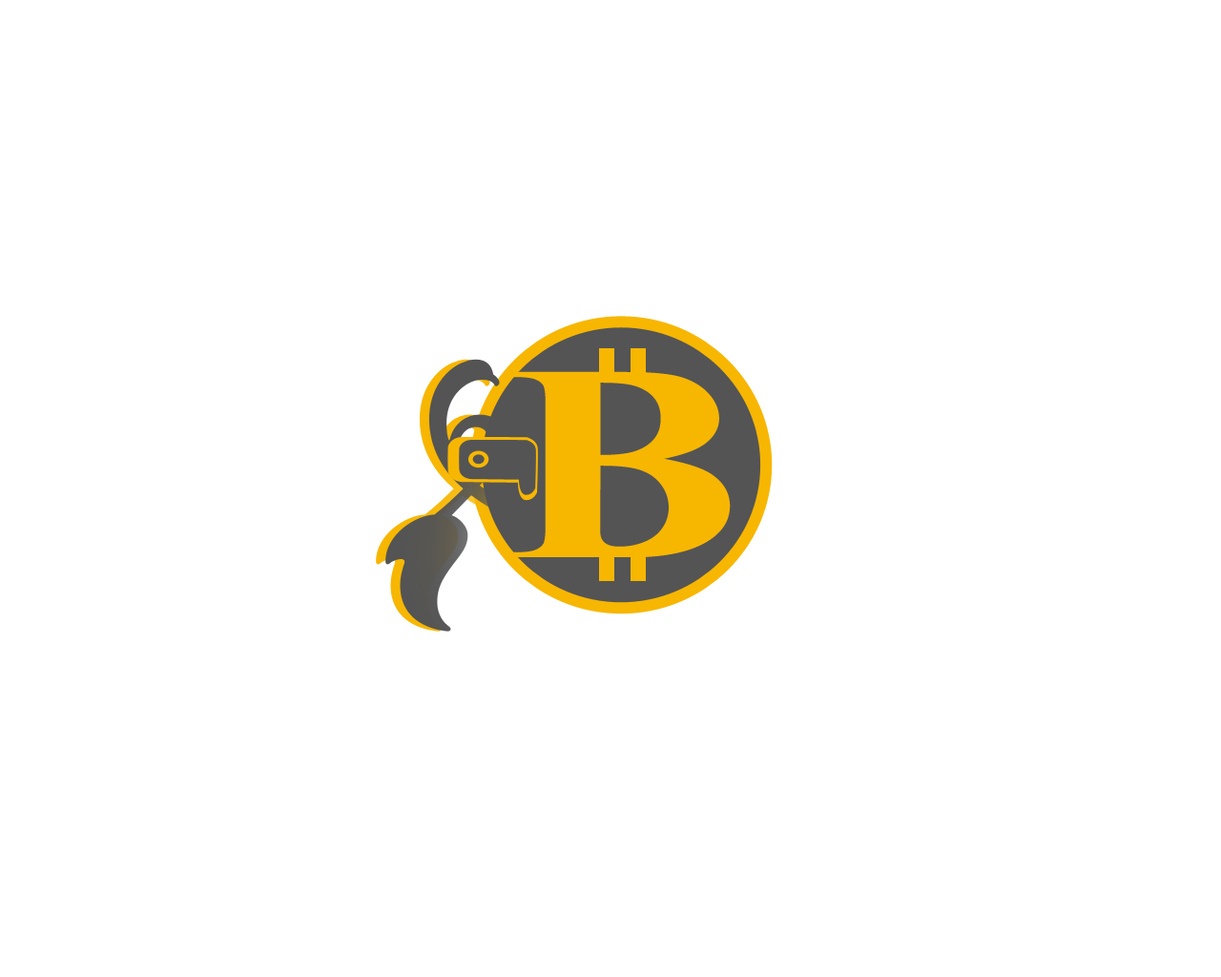
<style>
.page{position:relative;width:1221px;height:977px;background:#ffffff}
.page>*{position:absolute;margin:0}
.t1{font:278.3px "TimesNewRomanPS-BoldMT";color:#f7b600;scale:1.28 1}
</style>
<div class="page">
<p class="t1" style="left:512px;top:371px;width:219px;height:186px">B</p>
</div>
